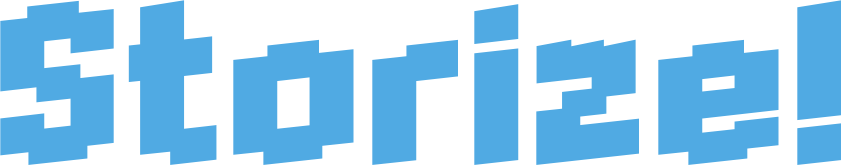
<style>
.page{position:relative;width:841px;height:165px;background:#50aae3}
.page>*{position:absolute;margin:0}
.t1{font:195px "Cafe24PROUP";color:#50aae3}
</style>
<div class="page">
<p class="t1" style="left:0px;top:0px;width:842px;height:165px">Storize!</p>
</div>
